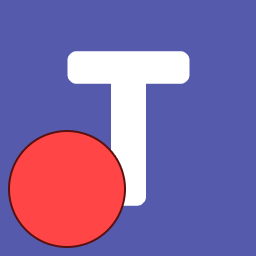
<style>
.page{position:relative;width:256px;height:256px;background:#555aac}
.page>*{position:absolute;margin:0}
.t1{font:200px "Ubuntu";color:#ffffff;font-weight:bold}
</style>
<div class="page">
<p class="t1" style="left:72px;top:56px;width:113px;height:145px">T</p>
</div>
